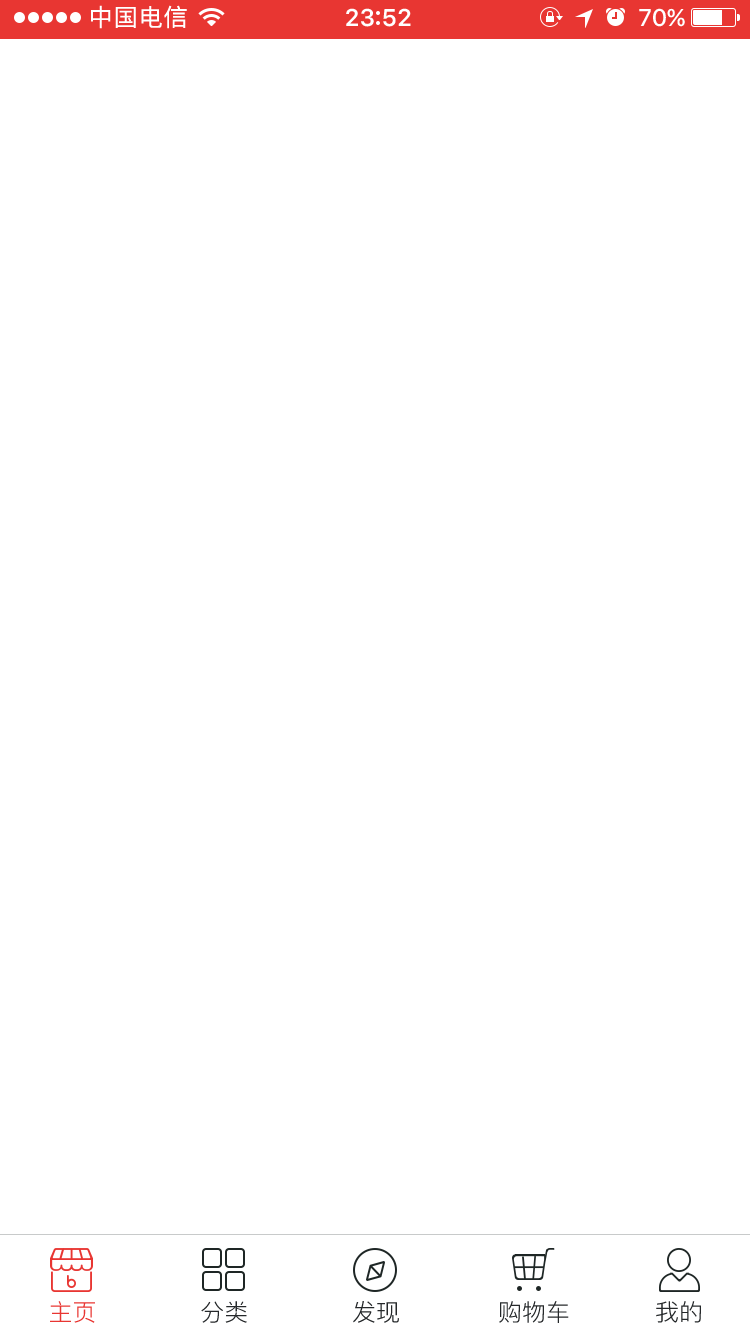
<style>
.page{position:relative;width:750px;height:1334px;background:#ffffff}
.page>*{position:absolute;margin:0}
.t1{font:23.7px "PingFang-SC-Regular";color:#e83632}
.t2{font:23.7px "PingFang-SC-Regular";color:#25282a}
</style>
<div class="page">
<p class="t1" style="left:50px;top:1301px;width:45px;height:22px">主页</p>
<p class="t2" style="left:201px;top:1301px;width:46px;height:22px">分类</p>
<p class="t2" style="left:353px;top:1301px;width:46px;height:22px">发现</p>
<p class="t2" style="left:499px;top:1301px;width:70px;height:22px">购物车</p>
<p class="t2" style="left:656px;top:1301px;width:45px;height:22px">我的</p>
</div>
